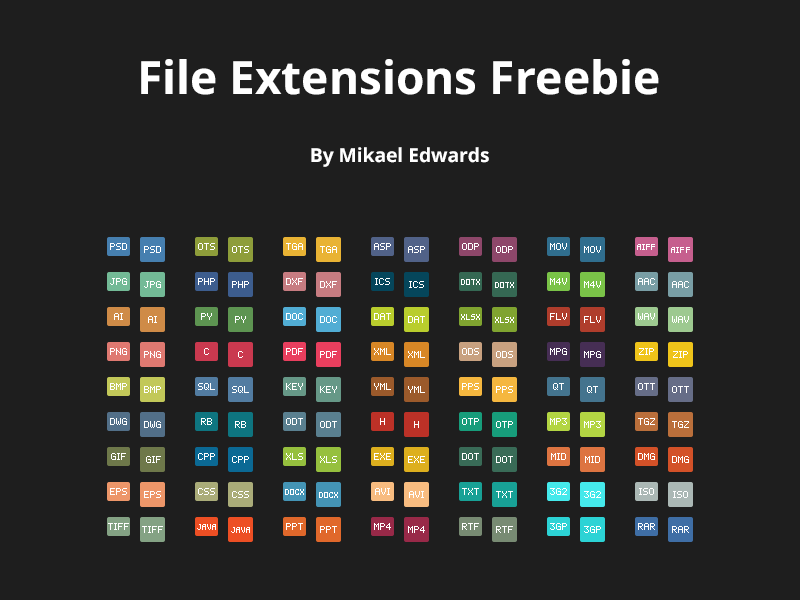
<style>
.page{position:relative;width:800px;height:600px;background:#1e1e1e}
.page>*{position:absolute;margin:0}
.t1{font:46px "OpenSans-Bold";color:#ffffff}
.t2{font:19.2px "OpenSans-Bold";color:#ffffff}
.t3{font:8px "pixelmix";color:#ffffff}
.t4{font:7px "pixelmix";color:#ffffff}
</style>
<div class="page">
<p class="t1" style="left:141px;top:59px;width:518px;height:36px">File Extensions Freebie</p>
<p class="t2" style="left:311px;top:147px;width:178px;height:20px">By Mikael Edwards</p>
<p class="t3" style="left:110px;top:243px;width:17px;height:7px">PSD</p>
<p class="t3" style="left:144px;top:246px;width:17px;height:7px">PSD</p>
<p class="t3" style="left:198px;top:243px;width:17px;height:7px">OTS</p>
<p class="t3" style="left:232px;top:246px;width:17px;height:7px">OTS</p>
<p class="t3" style="left:286px;top:243px;width:17px;height:7px">TGA</p>
<p class="t3" style="left:320px;top:246px;width:17px;height:7px">TGA</p>
<p class="t3" style="left:374px;top:243px;width:17px;height:7px">ASP</p>
<p class="t3" style="left:408px;top:246px;width:17px;height:7px">ASP</p>
<p class="t3" style="left:462px;top:243px;width:17px;height:7px">ODP</p>
<p class="t3" style="left:496px;top:246px;width:17px;height:7px">ODP</p>
<p class="t3" style="left:550px;top:243px;width:17px;height:7px">MOV</p>
<p class="t3" style="left:584px;top:246px;width:17px;height:7px">MOV</p>
<p class="t4" style="left:637px;top:244px;width:18px;height:6px">AIFF</p>
<p class="t4" style="left:671px;top:247px;width:19px;height:6px">AIFF</p>
<p class="t3" style="left:110px;top:278px;width:17px;height:7px">JPG</p>
<p class="t3" style="left:144px;top:281px;width:17px;height:7px">JPG</p>
<p class="t3" style="left:198px;top:278px;width:17px;height:7px">PHP</p>
<p class="t3" style="left:232px;top:281px;width:17px;height:7px">PHP</p>
<p class="t3" style="left:286px;top:278px;width:17px;height:7px">DXF</p>
<p class="t3" style="left:320px;top:281px;width:17px;height:7px">DXF</p>
<p class="t3" style="left:375px;top:278px;width:15px;height:7px">ICS</p>
<p class="t3" style="left:409px;top:281px;width:15px;height:7px">ICS</p>
<p class="t4" style="left:471px;top:279px;width:4px;height:6px">T</p>
<p class="t3" style="left:550px;top:278px;width:17px;height:7px">M4V</p>
<p class="t3" style="left:584px;top:281px;width:17px;height:7px">M4V</p>
<p class="t3" style="left:638px;top:278px;width:17px;height:7px">AAC</p>
<p class="t3" style="left:672px;top:281px;width:17px;height:7px">AAC</p>
<p class="t4" style="left:505px;top:282px;width:4px;height:6px">T</p>
<p class="t3" style="left:114px;top:313px;width:9px;height:7px">AI</p>
<p class="t3" style="left:148px;top:316px;width:9px;height:7px">AI</p>
<p class="t3" style="left:201px;top:313px;width:11px;height:7px">PY</p>
<p class="t3" style="left:235px;top:316px;width:11px;height:7px">PY</p>
<p class="t3" style="left:286px;top:313px;width:17px;height:7px">DOC</p>
<p class="t3" style="left:320px;top:316px;width:17px;height:7px">DOC</p>
<p class="t3" style="left:374px;top:313px;width:17px;height:7px">DAT</p>
<p class="t3" style="left:408px;top:316px;width:17px;height:7px">DAT</p>
<p class="t4" style="left:466px;top:314px;width:4px;height:6px">L</p>
<p class="t4" style="left:500px;top:317px;width:4px;height:6px">L</p>
<p class="t3" style="left:550px;top:313px;width:17px;height:7px">FLV</p>
<p class="t3" style="left:584px;top:316px;width:17px;height:7px">FLV</p>
<p class="t3" style="left:638px;top:313px;width:17px;height:7px">WAV</p>
<p class="t3" style="left:672px;top:316px;width:17px;height:7px">WAV</p>
<p class="t3" style="left:110px;top:348px;width:17px;height:7px">PNG</p>
<p class="t3" style="left:144px;top:351px;width:17px;height:7px">PNG</p>
<p class="t3" style="left:204px;top:348px;width:5px;height:7px">C</p>
<p class="t3" style="left:238px;top:351px;width:5px;height:7px">C</p>
<p class="t3" style="left:286px;top:348px;width:17px;height:7px">PDF</p>
<p class="t3" style="left:320px;top:351px;width:17px;height:7px">PDF</p>
<p class="t3" style="left:374px;top:348px;width:17px;height:7px">XML</p>
<p class="t3" style="left:408px;top:351px;width:17px;height:7px">XML</p>
<p class="t3" style="left:462px;top:348px;width:17px;height:7px">ODS</p>
<p class="t3" style="left:496px;top:351px;width:17px;height:7px">ODS</p>
<p class="t3" style="left:550px;top:348px;width:17px;height:7px">MPG</p>
<p class="t3" style="left:584px;top:351px;width:17px;height:7px">MPG</p>
<p class="t3" style="left:639px;top:348px;width:15px;height:7px">ZIP</p>
<p class="t3" style="left:673px;top:351px;width:15px;height:7px">ZIP</p>
<p class="t3" style="left:110px;top:383px;width:17px;height:7px">BMP</p>
<p class="t3" style="left:144px;top:386px;width:17px;height:7px">BMP</p>
<p class="t3" style="left:198px;top:383px;width:17px;height:7px">SQL</p>
<p class="t3" style="left:232px;top:386px;width:17px;height:7px">SQL</p>
<p class="t3" style="left:286px;top:383px;width:17px;height:7px">KEY</p>
<p class="t3" style="left:320px;top:386px;width:17px;height:7px">KEY</p>
<p class="t3" style="left:374px;top:383px;width:17px;height:7px">YML</p>
<p class="t3" style="left:408px;top:386px;width:17px;height:7px">YML</p>
<p class="t3" style="left:462px;top:383px;width:17px;height:7px">PPS</p>
<p class="t3" style="left:496px;top:386px;width:17px;height:7px">PPS</p>
<p class="t3" style="left:553px;top:383px;width:11px;height:7px">QT</p>
<p class="t3" style="left:587px;top:386px;width:11px;height:7px">QT</p>
<p class="t3" style="left:638px;top:383px;width:17px;height:7px">OTT</p>
<p class="t3" style="left:672px;top:386px;width:17px;height:7px">OTT</p>
<p class="t3" style="left:110px;top:418px;width:17px;height:7px">DWG</p>
<p class="t3" style="left:144px;top:421px;width:17px;height:7px">DWG</p>
<p class="t3" style="left:201px;top:418px;width:11px;height:7px">RB</p>
<p class="t3" style="left:235px;top:421px;width:11px;height:7px">RB</p>
<p class="t3" style="left:286px;top:418px;width:17px;height:7px">ODT</p>
<p class="t3" style="left:320px;top:421px;width:17px;height:7px">ODT</p>
<p class="t3" style="left:380px;top:418px;width:5px;height:7px">H</p>
<p class="t3" style="left:414px;top:421px;width:5px;height:7px">H</p>
<p class="t3" style="left:462px;top:418px;width:17px;height:7px">OTP</p>
<p class="t3" style="left:496px;top:421px;width:17px;height:7px">OTP</p>
<p class="t3" style="left:550px;top:418px;width:17px;height:7px">MP3</p>
<p class="t3" style="left:584px;top:421px;width:17px;height:7px">MP3</p>
<p class="t3" style="left:638px;top:418px;width:17px;height:7px">TGZ</p>
<p class="t3" style="left:672px;top:421px;width:17px;height:7px">TGZ</p>
<p class="t3" style="left:111px;top:453px;width:15px;height:7px">GIF</p>
<p class="t3" style="left:146px;top:456px;width:15px;height:7px">GIF</p>
<p class="t3" style="left:198px;top:453px;width:17px;height:7px">CPP</p>
<p class="t3" style="left:232px;top:456px;width:17px;height:7px">CPP</p>
<p class="t3" style="left:286px;top:453px;width:17px;height:7px">XLS</p>
<p class="t3" style="left:320px;top:456px;width:17px;height:7px">XLS</p>
<p class="t3" style="left:374px;top:453px;width:17px;height:7px">EXE</p>
<p class="t3" style="left:408px;top:456px;width:17px;height:7px">EXE</p>
<p class="t3" style="left:462px;top:453px;width:17px;height:7px">DOT</p>
<p class="t3" style="left:496px;top:456px;width:17px;height:7px">DOT</p>
<p class="t3" style="left:551px;top:453px;width:15px;height:7px">MID</p>
<p class="t3" style="left:585px;top:456px;width:15px;height:7px">MID</p>
<p class="t3" style="left:638px;top:453px;width:17px;height:7px">DMG</p>
<p class="t3" style="left:672px;top:456px;width:17px;height:7px">DMG</p>
<p class="t3" style="left:110px;top:488px;width:17px;height:7px">EPS</p>
<p class="t3" style="left:144px;top:491px;width:17px;height:7px">EPS</p>
<p class="t3" style="left:198px;top:488px;width:17px;height:7px">CSS</p>
<p class="t3" style="left:232px;top:491px;width:17px;height:7px">CSS</p>
<p class="t4" style="left:295px;top:489px;width:4px;height:6px">C</p>
<p class="t4" style="left:329px;top:492px;width:4px;height:6px">C</p>
<p class="t3" style="left:375px;top:488px;width:15px;height:7px">AVI</p>
<p class="t3" style="left:409px;top:491px;width:15px;height:7px">AVI</p>
<p class="t3" style="left:462px;top:488px;width:17px;height:7px">TXT</p>
<p class="t3" style="left:496px;top:491px;width:17px;height:7px">TXT</p>
<p class="t3" style="left:550px;top:488px;width:17px;height:7px">3G2</p>
<p class="t3" style="left:584px;top:491px;width:17px;height:7px">3G2</p>
<p class="t3" style="left:639px;top:488px;width:15px;height:7px">ISO</p>
<p class="t3" style="left:673px;top:491px;width:15px;height:7px">ISO</p>
<p class="t3" style="left:108px;top:523px;width:21px;height:7px">TIFF</p>
<p class="t3" style="left:142px;top:526px;width:21px;height:7px">TIFF</p>
<p class="t4" style="left:197px;top:524px;width:19px;height:6px">JAVA</p>
<p class="t4" style="left:231px;top:527px;width:19px;height:6px">JAVA</p>
<p class="t3" style="left:286px;top:523px;width:17px;height:7px">PPT</p>
<p class="t3" style="left:320px;top:526px;width:17px;height:7px">PPT</p>
<p class="t3" style="left:374px;top:523px;width:17px;height:7px">MP4</p>
<p class="t3" style="left:408px;top:526px;width:17px;height:7px">MP4</p>
<p class="t3" style="left:462px;top:523px;width:17px;height:7px">RTF</p>
<p class="t3" style="left:496px;top:526px;width:17px;height:7px">RTF</p>
<p class="t3" style="left:550px;top:523px;width:17px;height:7px">3GP</p>
<p class="t3" style="left:584px;top:526px;width:17px;height:7px">3GP</p>
<p class="t3" style="left:638px;top:523px;width:17px;height:7px">RAR</p>
<p class="t3" style="left:672px;top:526px;width:17px;height:7px">RAR</p>
</div>
